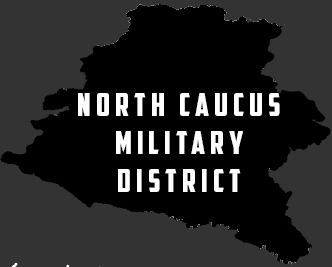
<style>
.page{position:relative;width:332px;height:267px;background:#000000}
.page>*{position:absolute;margin:0}
.t1{font:32px "AmericanCaptain";letter-spacing:0.16em;color:#ffffff}
</style>
<div class="page">
<p class="t1" style="left:78px;top:93px;width:202px;height:99px;text-align:center">north caucus<br>military<br>district</p>
</div>
